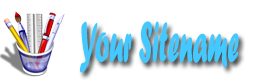
<style>
.page{position:relative;width:260px;height:80px;background:#ffffff}
.page>*{position:absolute;margin:0}
.t1{font:60px "ForteMT";color:#43c8ff;scale:0.44 1}
</style>
<div class="page">
<p class="t1" style="left:79px;top:21px;width:160px;height:52px">Your Sitename</p>
</div>
